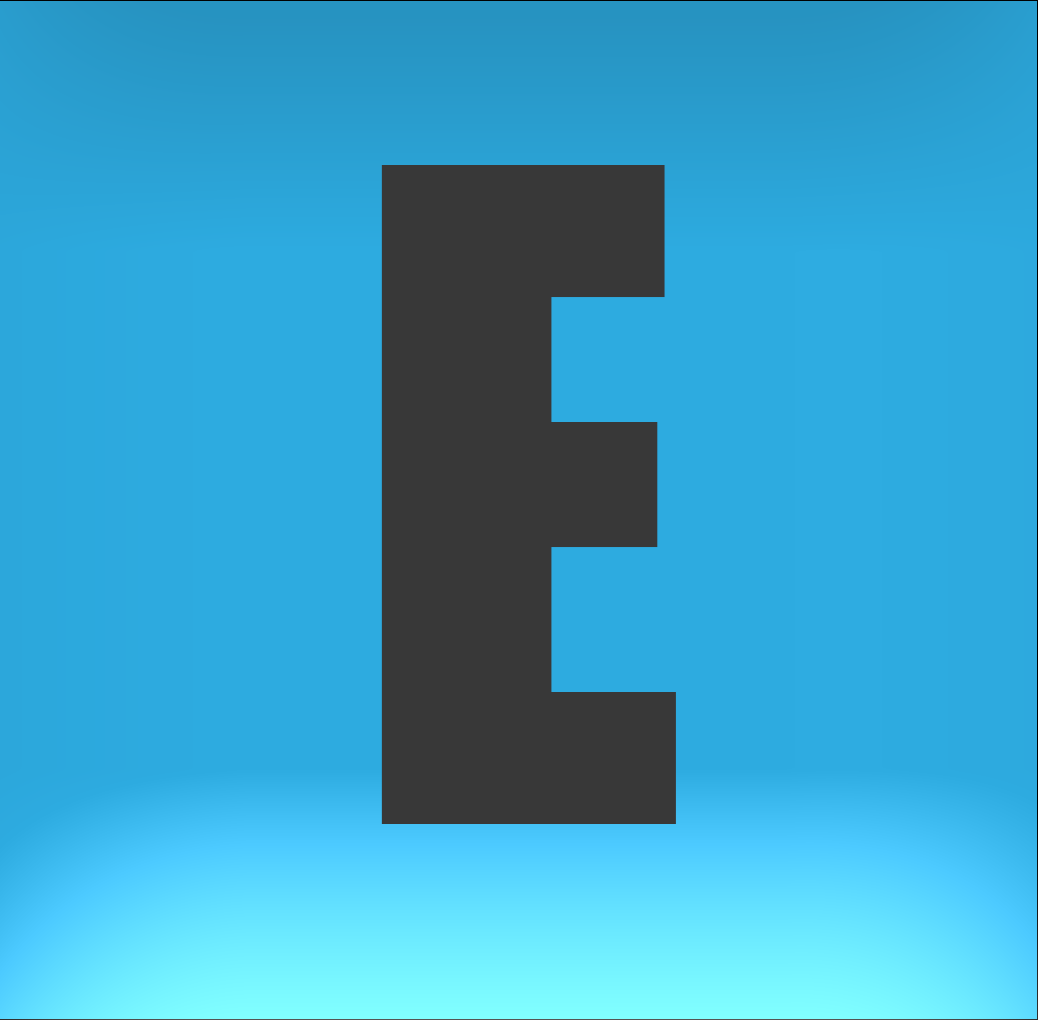
<style>
.page{position:relative;width:1038px;height:1020px;background:#2dabe0}
.page>*{position:absolute;margin:0}
.t1{font:833.3px "Impact";letter-spacing:-0.04em;color:#383838;text-transform:uppercase}
.t2{font:833.3px "MyriadPro-Regular";letter-spacing:-0.04em;color:#000000;text-transform:uppercase}
</style>
<div class="page">
<p class="t1" style="left:381px;top:165px;width:295px;height:659px"><span class="t2"><br><br><br><br><br><br><br><br><br><br><br><br><br><br><br><br><br><br><br><br><br><br><br><br><br><br><br><br><br><br><br></span>E</p>
</div>
